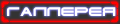
<style>
.page{position:relative;width:120px;height:24px}
.page>*{position:absolute;margin:0}
.t1{font:12px "TerminatorCyr4-Semi-expandedBold";color:#ffffff}
</style>
<div class="page">
<p class="t1" style="left:7px;top:7px;width:109px;height:9px">галлерея</p>
</div>
